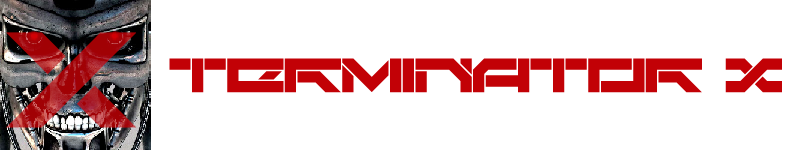
<style>
.page{position:relative;width:800px;height:150px;background:#ffffff}
.page>*{position:absolute;margin:0}
.t1{font:189.1px "TechnoHideo"}
.t2{font:45px "Darktech-LDR";color:#c20106}
</style>
<div class="page">
<p class="t1" style="left:6px;top:32px;width:130px;height:96px">X</p>
<p class="t2" style="left:169px;top:58px;width:613px;height:35px">TERMINATOR X</p>
</div>
